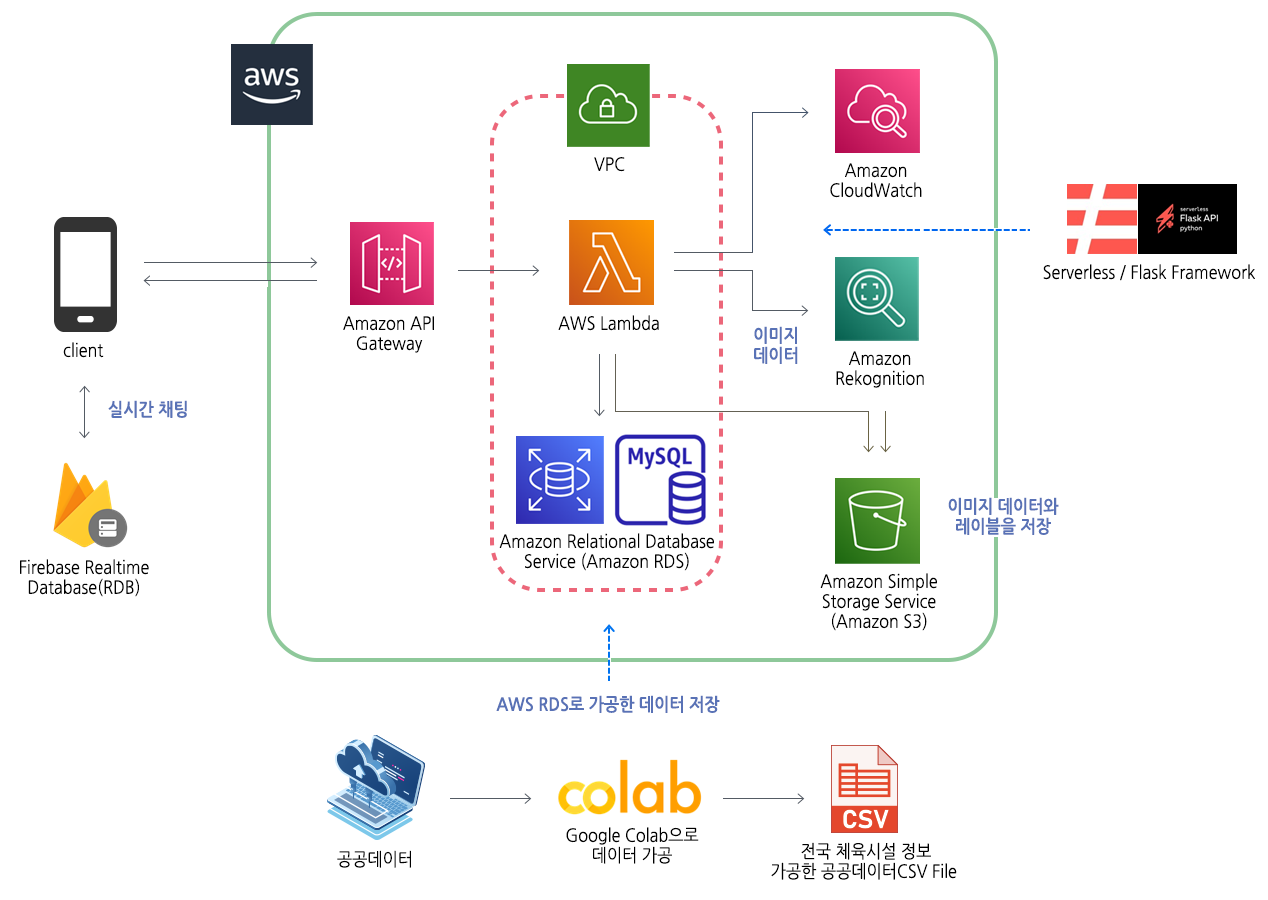
<style>
.page{position:relative;width:1268px;height:900px;background:#ffffff}
.page>*{position:absolute;margin:0}
.t1{font:18px "NanumGothic";color:#000000;scale:0.9 1}
.t2{font:18px/20px "NanumGothic";color:#000000;scale:0.9 1}
.t3{font:18px/20px "NanumGothicBold";color:#5972b6;scale:0.9 1}
.t4{font:18px "NanumGothicBold";color:#5972b6;scale:0.9 1}
</style>
<div class="page">
<p class="t1" style="left:594px;top:157px;width:31px;height:15px">VPC</p>
<p class="t2" style="left:830px;top:163px;width:92px;height:35px;text-align:center">Amazon<br>CloudWatch</p>
<p class="t1" style="left:1043px;top:264px;width:212px;height:17px">Serverless / Flask Framework</p>
<p class="t2" style="left:343px;top:316px;width:91px;height:37px;text-align:center">Amazon API<br>Gateway</p>
<p class="t1" style="left:558px;top:315px;width:101px;height:16px">AWS Lambda</p>
<p class="t3" style="left:754px;top:326px;width:44px;height:38px;text-align:center">이미지<br>데이터</p>
<p class="t1" style="left:63px;top:342px;width:41px;height:16px">client</p>
<p class="t2" style="left:836px;top:351px;width:88px;height:37px;text-align:center">Amazon<br>Rekognition</p>
<p class="t4" style="left:108px;top:400px;width:79px;height:18px">실시간 채팅</p>
<p class="t3" style="left:948px;top:497px;width:111px;height:38px;text-align:center">이미지 데이터와<br>레이블을 저장</p>
<p class="t2" style="left:499px;top:533px;width:215px;height:38px;text-align:center">Amazon Relational Database<br>Service (Amazon RDS)</p>
<p class="t2" style="left:20px;top:559px;width:129px;height:38px;text-align:center">Firebase Realtime<br>Database(RDB)</p>
<p class="t2" style="left:820px;top:573px;width:117px;height:58px;text-align:center">Amazon Simple<br>Storage Service<br>(Amazon S3)</p>
<p class="t4" style="left:496px;top:695px;width:224px;height:18px">AWS RDS로 가공한 데이터 저장</p>
<p class="t2" style="left:566px;top:827px;width:133px;height:37px;text-align:center">Google Colab으로<br>데이터 가공</p>
<p class="t2" style="left:771px;top:842px;width:186px;height:38px;text-align:center">전국 체육시설 정보<br>가공한 공공데이터CSV File</p>
<p class="t1" style="left:337px;top:850px;width:74px;height:18px">공공데이터</p>
</div>
